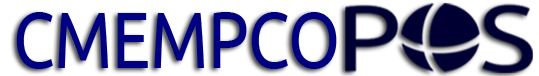
<style>
.page{position:relative;width:539px;height:76px;background:#ffffff}
.page>*{position:absolute;margin:0}
.t1{font:79.8px "Ubuntu";color:#000080;scale:0.83 1}
</style>
<div class="page">
<p class="t1" style="left:16px;top:12px;width:321px;height:57px">CMEMPCO</p>
</div>
